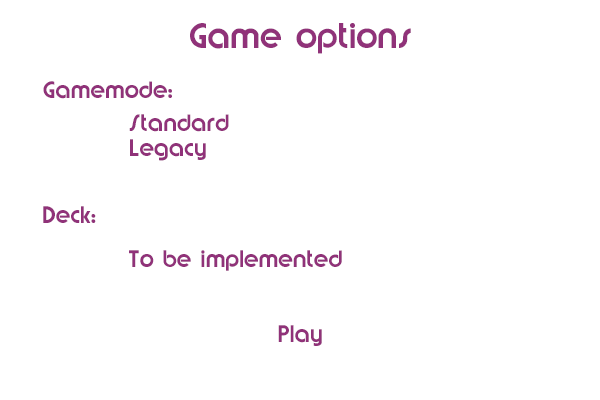
<style>
.page{position:relative;width:600px;height:400px;background:#ffffff}
.page>*{position:absolute;margin:0}
.t1{font:30px "Brandish";color:#903279}
.t2{font:20px "Brandish";color:#903279}
</style>
<div class="page">
<p class="t1" style="left:190px;top:23px;width:221px;height:31px">Game options</p>
<p class="t2" style="left:43px;top:81px;width:129px;height:18px">Gamemode:</p>
<p class="t2" style="left:129px;top:114px;width:100px;height:18px">Standard</p>
<p class="t2" style="left:130px;top:139px;width:76px;height:22px">Legacy</p>
<p class="t2" style="left:43px;top:206px;width:53px;height:17px">Deck:</p>
<p class="t2" style="left:129px;top:250px;width:213px;height:21px">To be implemented</p>
<p class="t2" style="left:278px;top:325px;width:44px;height:21px">Play</p>
</div>
